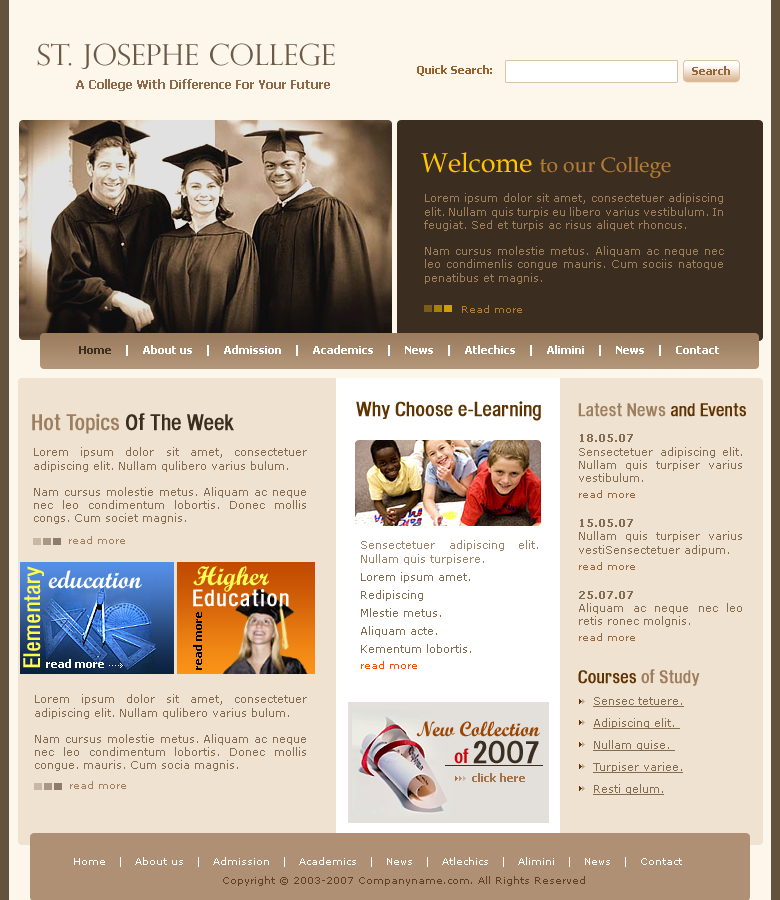
<style>
.page{position:relative;width:780px;height:900px;background:#f0e2d0}
.page>*{position:absolute;margin:0}
.t1{font:29px "PerpetuaTitlingMT-Light";color:#6c5a48}
.t2{font:11px "Tahoma-Bold";color:#9b612c}
.t3{font:11px "Tahoma-Bold";color:#996637}
.t4{font:12px "Tahoma-Bold";color:#8e6a48}
.t5{font:21px "BookAntiqua";color:#b47b34}
.t6{font:27px "BookAntiqua";color:#ffc600}
.t7{font:11px "Verdana";color:#9f7f5a}
.t8{font:10px "Verdana";color:#b47b34}
.t9{font:11px "Tahoma-Bold";color:#ffffff}
.t10{font:11px "Tahoma-Bold";color:#3c2d21}
.t11{font:20px "HeadacheNormal";color:#603401}
.t12{font:22px "HeadacheNormal";color:#3c2d21}
.t13{font:22px "HeadacheNormal";color:#9d7e60}
.t14{font:18px "HeadacheNormal";color:#9d7e60}
.t15{font:18px "HeadacheNormal";color:#603401}
.t16{font:11px "Verdana";color:#846c50}
.t17{font:11px "Verdana-Bold";color:#846c50}
.t18{font:10px/16px "Verdana";color:#94693f}
.t19{font:10px "Verdana";color:#a08163}
.t20{font:11px/18px "Verdana";color:#846c50}
.t21{font:11px "Verdana";color:#a18264}
.t22{font:10px/16px "Verdana";color:#ff4e00}
.t23{font:23px "HeliosCond";color:#fffd54;font-weight:bold}
.t24{font:27px "ScriptMTBold";color:#fffd54}
.t25{font:25px "ScriptMTBold";color:#ffffff}
.t26{font:23px "HeadacheNormal";letter-spacing:0.05em;color:#ffffff}
.t27{font:11px "Tahoma-Bold";color:#000000}
.t28{font:11px/22px "Verdana";color:#846c50;text-decoration:underline}
.t29{font:21px "ScriptMTBold";color:#9b4501}
.t30{font:31px "HeadacheNormal";color:#3c2d21}
.t31{font:19px "HeadacheNormal";color:#cf030b}
.t32{font:11px "Tahoma-Bold";color:#a47349}
.t33{font:10px "Verdana";color:#ffffff}
.t34{font:10px "Verdana";color:#604023}
</style>
<div class="page">
<p class="t1" style="left:37px;top:43px;width:298px;height:26px">St. Josephe College</p>
<p class="t2" style="left:417px;top:65px;width:75px;height:11px">Quick Search:</p>
<p class="t3" style="left:692px;top:66px;width:38px;height:9px">Search</p>
<p class="t4" style="left:76px;top:79px;width:254px;height:12px">A College With Difference For Your Future</p>
<p class="t5" style="left:421px;top:152px;width:250px;height:26px"><span class="t6">Welcome </span>to our College</p>
<p class="t7" style="left:424px;top:193px;width:300px;height:91px;text-align:justify">Lorem ipsum dolor sit amet, consectetuer adipiscing elit. Nullam quis turpis eu libero varius vestibulum. In feugiat. Sed et turpis ac risus aliquet rhoncus. <br><br>Nam cursus molestie metus. Aliquam ac neque nec leo condimenlis congue mauris. Cum sociis natoque penatibus et magnis.</p>
<p class="t8" style="left:462px;top:305px;width:60px;height:8px">Read more</p>
<p class="t9" style="left:79px;top:345px;width:640px;height:11px"><span class="t10">Home  </span>  |    About us    |    Admission    |    Academics    |    News    |    Atlechics    |    Alimini    |    News    |    Contact</p>
<p class="t11" style="left:356px;top:401px;width:185px;height:20px">Why Choose e-Learning</p>
<p class="t12" style="left:32px;top:413px;width:202px;height:21px"><span class="t13">Hot Topics</span> Of The Week</p>
<p class="t14" style="left:578px;top:403px;width:168px;height:14px">Latest News <span class="t15">and Events</span></p>
<p class="t16" style="left:579px;top:434px;width:163px;height:207px;text-align:justify"><span class="t17">18.05.07<br></span>Sensectetuer adipiscing elit. Nullam quis turpiser varius vestibulum.<br><span class="t18">read more<br><br></span><span class="t17">15.05.07<br></span>Nullam quis turpiser varius vestiSensectetuer adipum.<br><span class="t18">read more<br><br></span><span class="t17">25.07.07<br></span>Aliquam ac neque nec leo retis ronec molgnis.<br><span class="t18">read more</span></p>
<p class="t16" style="left:34px;top:447px;width:273px;height:77px;text-align:justify">Lorem ipsum dolor sit amet, consectetuer adipiscing elit. Nullam qulibero varius bulum. <br><br>Nam cursus molestie metus. Aliquam ac neque nec leo condimentum lobortis. Donec mollis congs. Cum societ magnis.</p>
<p class="t19" style="left:69px;top:536px;width:56px;height:8px">read more</p>
<p class="t20" style="left:361px;top:540px;width:177px;height:129px;text-align:justify"><span class="t21">Sensectetuer adipiscing elit. Nullam quis turpisere.<br></span>Lorem ipsum amet.<br>Redipiscing<br>Mlestie metus. <br>Aliquam acte. <br>Kementum lobortis.<br><span class="t22">read more</span></p>
<p class="t23" style="left:23px;top:566px;width:21px;height:102px;rotate:-90deg">Elementary</p>
<p class="t24" style="left:193px;top:566px;width:76px;height:26px">Higher</p>
<p class="t25" style="left:48px;top:570px;width:94px;height:19px">education</p>
<p class="t26" style="left:193px;top:589px;width:96px;height:18px">Education</p>
<p class="t27" style="left:193px;top:612px;width:9px;height:58px;rotate:-90deg">read more</p>
<p class="t9" style="left:46px;top:659px;width:58px;height:9px">read more</p>
<p class="t14" style="left:578px;top:669px;width:122px;height:17px"><span class="t15">Courses </span>of Study</p>
<p class="t16" style="left:35px;top:694px;width:272px;height:77px;text-align:justify">Lorem ipsum dolor sit amet, consectetuer adipiscing elit. Nullam qulibero varius bulum. <br><br>Nam cursus molestie metus. Aliquam ac neque nec leo condimentum lobortis. Donec mollis congue. mauris. Cum socia magnis.</p>
<p class="t28" style="left:593px;top:697px;width:91px;height:98px;text-align:justify">Sensec tetuere.<br>Adipiscing elit. <br>Nullam quise. <br>Turpiser variee.<br>Resti gelum.</p>
<p class="t29" style="left:416px;top:721px;width:124px;height:16px">New Collection</p>
<p class="t30" style="left:454px;top:740px;width:85px;height:24px"><span class="t31">of </span>2007</p>
<p class="t32" style="left:472px;top:773px;width:53px;height:9px">click here</p>
<p class="t19" style="left:70px;top:781px;width:56px;height:8px">read more</p>
<p class="t33" style="left:74px;top:857px;width:608px;height:10px">Home   |   About us   |   Admission   |   Academics   |   News   |   Atlechics   |   Alimini   |   News   |   Contact</p>
<p class="t34" style="left:223px;top:876px;width:362px;height:10px">Copyright © 2003-2007 Companyname.com. All Rights Reserved</p>
</div>
